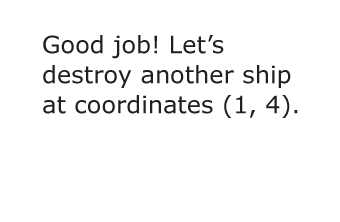
<style>
.page{position:relative;width:340px;height:222px;background:#ffffff}
.page>*{position:absolute;margin:0}
.t1{font:24px/30px "Verdana";color:#202020}
</style>
<div class="page">
<p class="t1" style="left:43px;top:35px;width:255px;height:83px">Good job! Let’s<br>destroy another ship at coordinates (1, 4).</p>
</div>
